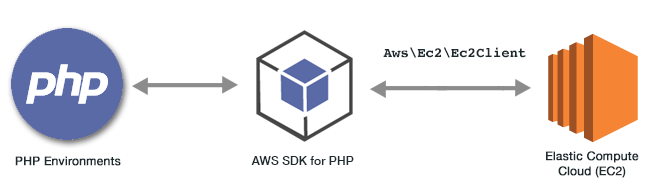
<style>
.page{position:relative;width:650px;height:190px;background:#ffffff}
.page>*{position:absolute;margin:0}
.t1{font:14px "Courier-Bold";color:#1d2a2e}
.t2{font:12px "HelveticaNeue";color:#1d2a2e;font-weight:bold}
.t3{font:12.1px "HelveticaNeue-Medium";color:#1d2a2e}
</style>
<div class="page">
<p class="t1" style="left:383px;top:47px;width:143px;height:11px">Aws\Ec2\Ec2Client</p>
<p class="t2" style="left:15px;top:156px;width:106px;height:10px">PHP Environments</p>
<p class="t3" style="left:251px;top:156px;width:103px;height:9px">AWS SDK for PHP</p>
<p class="t2" style="left:546px;top:151px;width:93px;height:27px;text-align:center">Elastic Compute<br>Cloud (EC2)</p>
</div>
